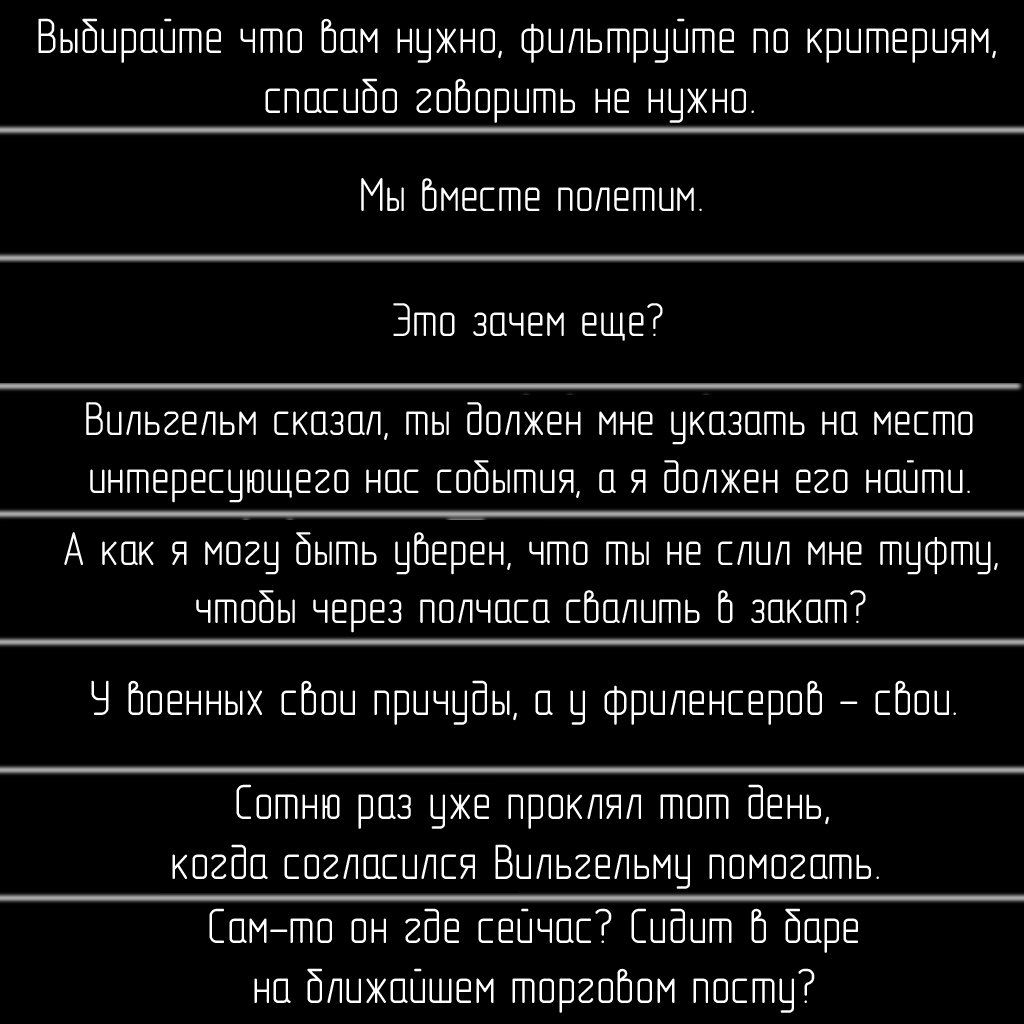
<style>
.page{position:relative;width:1024px;height:1024px;background:#000000}
.page>*{position:absolute;margin:0}
.t1{font:50px "GOST-2.304-81typeA";color:#ffffff}
.t2{font:48px "GOST-2.304-81typeA";color:#ffffff}
</style>
<div class="page">
<p class="t1" style="left:38px;top:18px;width:958px;height:105px;text-align:center">Выбирайте что вам нужно, фильтруйте по критериям,<br>спасибо говорить не нужно.</p>
<p class="t2" style="left:361px;top:178px;width:341px;height:33px">Мы вместе полетим.</p>
<p class="t2" style="left:393px;top:303px;width:270px;height:38px">Это зачем еще?</p>
<p class="t2" style="left:86px;top:402px;width:887px;height:101px;text-align:center">Вильгельм сказал, ты должен мне указать на место<br>интересующего нас события, а я должен его найти.</p>
<p class="t2" style="left:64px;top:532px;width:934px;height:101px;text-align:center">А как я могу быть уверен, что ты не слил мне туфту,<br>чтобы через полчаса свалить в закат?</p>
<p class="t1" style="left:91px;top:680px;width:865px;height:45px">У военных свои причуды, а у фриленсеров - свои.</p>
<p class="t1" style="left:172px;top:784px;width:707px;height:105px;text-align:center">Сотню раз уже проклял тот день,<br>когда согласился Вильгельму помогать.</p>
<p class="t1" style="left:209px;top:908px;width:649px;height:105px;text-align:center">Сам-то он где сейчас? Сидит в баре<br>на ближайшем торговом посту?</p>
</div>
